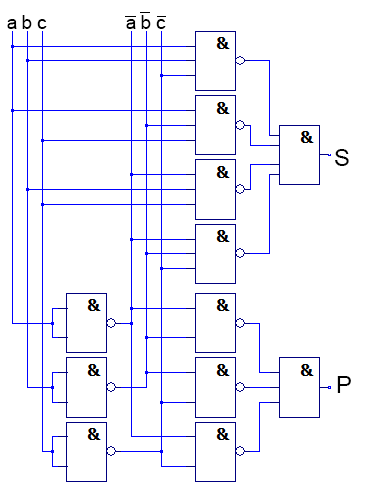
<style>
.page{position:relative;width:366px;height:491px;background:#ffffff}
.page>*{position:absolute;margin:0}
.t1{font:18.7px "ArialMT";color:#000000}
.t2{font:24px "ArialMT";color:#000000}
</style>
<div class="page">
<p class="t1" style="left:22px;top:15px;width:10px;height:14px">b</p>
<p class="t1" style="left:141px;top:15px;width:10px;height:14px">b</p>
<p class="t1" style="left:7px;top:19px;width:10px;height:10px">a</p>
<p class="t1" style="left:37px;top:19px;width:10px;height:10px">c</p>
<p class="t1" style="left:126px;top:19px;width:10px;height:10px">a</p>
<p class="t1" style="left:156px;top:19px;width:10px;height:10px">c</p>
<p class="t2" style="left:335px;top:149px;width:14px;height:17px">S</p>
<p class="t2" style="left:337px;top:376px;width:14px;height:17px">P</p>
</div>
